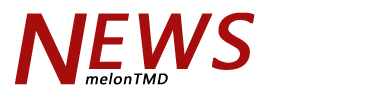
<style>
.page{position:relative;width:388px;height:100px;background:#ffffff}
.page>*{position:absolute;margin:0}
.t1{font:92px "MicrosoftYaHei";letter-spacing:0.05em;color:#a60d0d;font-weight:bold;font-style:italic}
.t2{font:72px "MicrosoftYaHei";letter-spacing:0.05em;color:#a60d0d;font-weight:bold;font-style:italic}
.t3{font:14px "MicrosoftYaHei";letter-spacing:0.05em;color:#000000;font-weight:bold;font-style:italic}
</style>
<div class="page">
<p class="t1" style="left:15px;top:13px;width:72px;height:72px">N</p>
<p class="t2" style="left:89px;top:12px;width:166px;height:58px">EWS</p>
<p class="t3" style="left:85px;top:72px;width:83px;height:13px">melonTMD</p>
</div>
